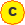
<style>
.page{position:relative;width:25px;height:25px;background:#fff200}
.page>*{position:absolute;margin:0}
.t1{font:11.5px "Arial-Black";color:#353535}
</style>
<div class="page">
<p class="t1" style="left:8px;top:7px;width:9px;height:9px">C</p>
</div>
